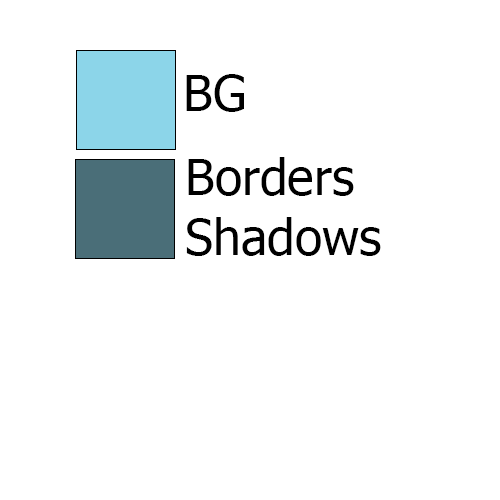
<style>
.page{position:relative;width:500px;height:500px;background:#ffffff}
.page>*{position:absolute;margin:0}
.t1{font:12px "Tahoma";color:#000000}
</style>
<div class="page">
<p class="t1" style="left:186px;top:74px;width:58px;height:38px">BG</p>
<p class="t1" style="left:186px;top:157px;width:195px;height:99px">Borders<br>Shadows</p>
</div>
